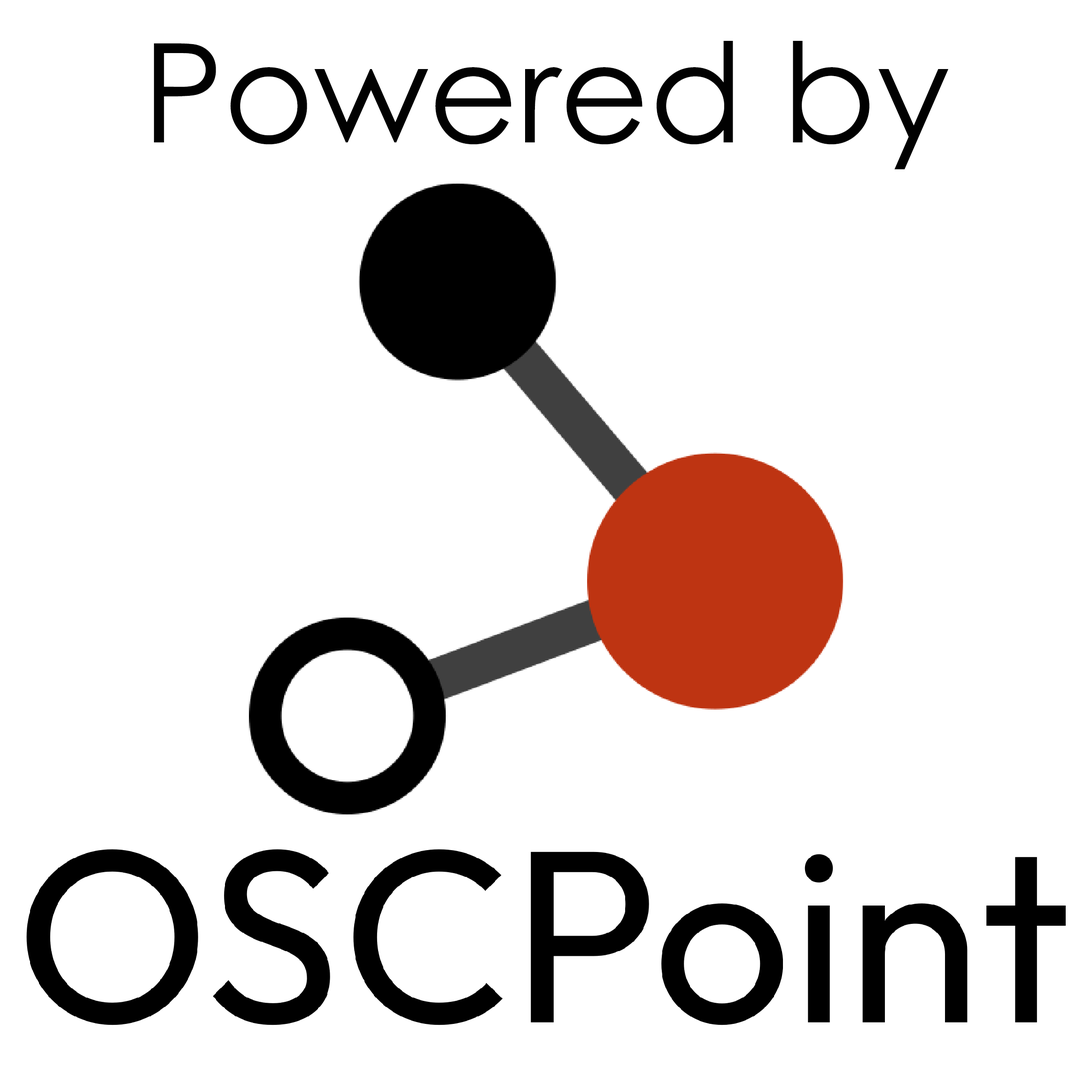
<style>
.page{position:relative;width:1092px;height:1092px;background:#ffffff}
.page>*{position:absolute;margin:0}
.t1{font:137.9px "CenturyGothic";color:#010101}
</style>
<div class="page">
<p class="t1" style="left:154px;top:41px;width:794px;height:129px">Powered by</p>
</div>
